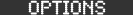
<style>
.page{position:relative;width:133px;height:15px;background:#333333}
.page>*{position:absolute;margin:0}
.t1{font:20px "SynchroLET";color:#ffffff}
</style>
<div class="page">
<p class="t1" style="left:28px;top:0px;width:78px;height:15px">OPTIONS</p>
</div>
